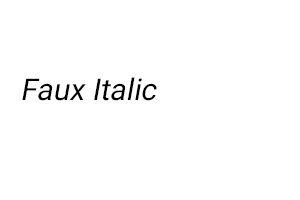
<style>
.page{position:relative;width:300px;height:200px;background:#ffffff}
.page>*{position:absolute;margin:0}
.t1{font:30px "Roboto-Regular";color:#000000;font-style:italic}
</style>
<div class="page">
<p class="t1" style="left:22px;top:77px;width:135px;height:24px">Faux Italic</p>
</div>
